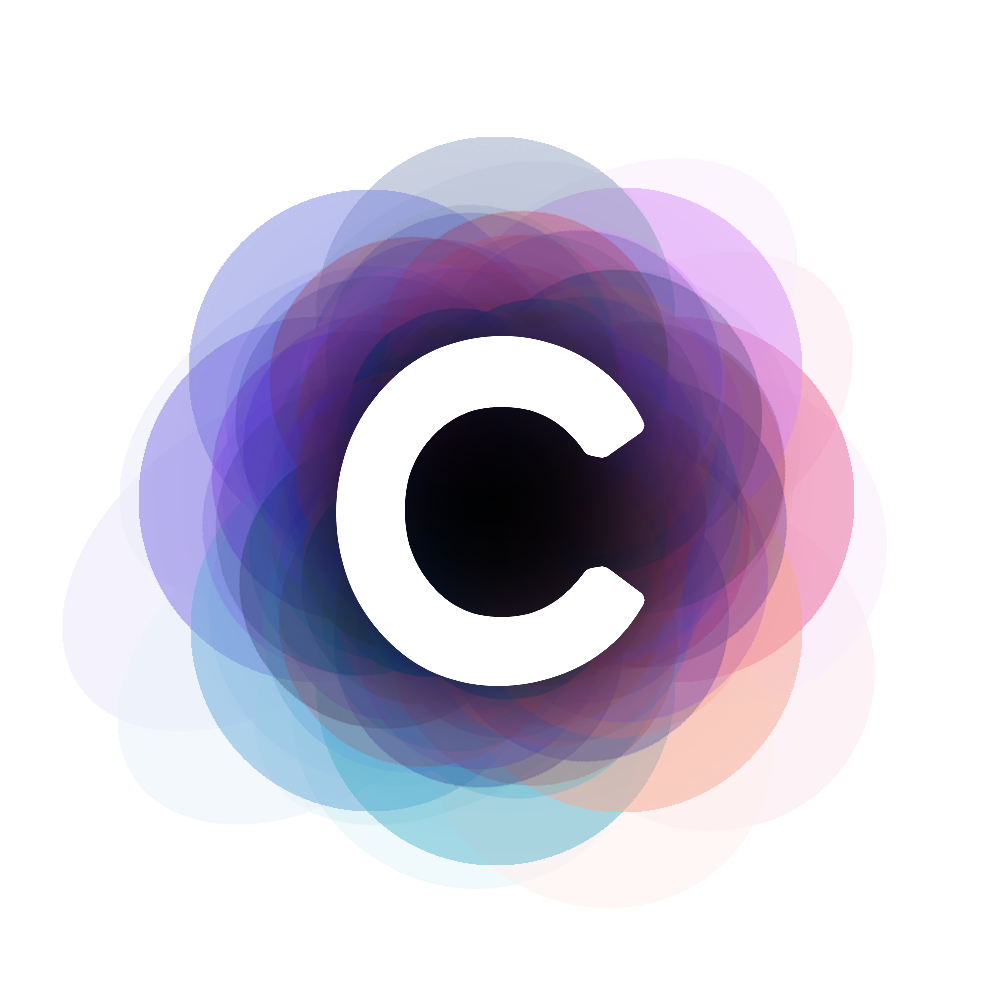
<style>
.page{position:relative;width:1000px;height:1000px;background:#ffffff}
.page>*{position:absolute;margin:0}
.t1{font:562.4px "STHeitiSC-Light";color:#ffffff;font-weight:bold;scale:0.9 1}
</style>
<div class="page">
<p class="t1" style="left:345px;top:345px;width:291px;height:332px">c</p>
</div>
